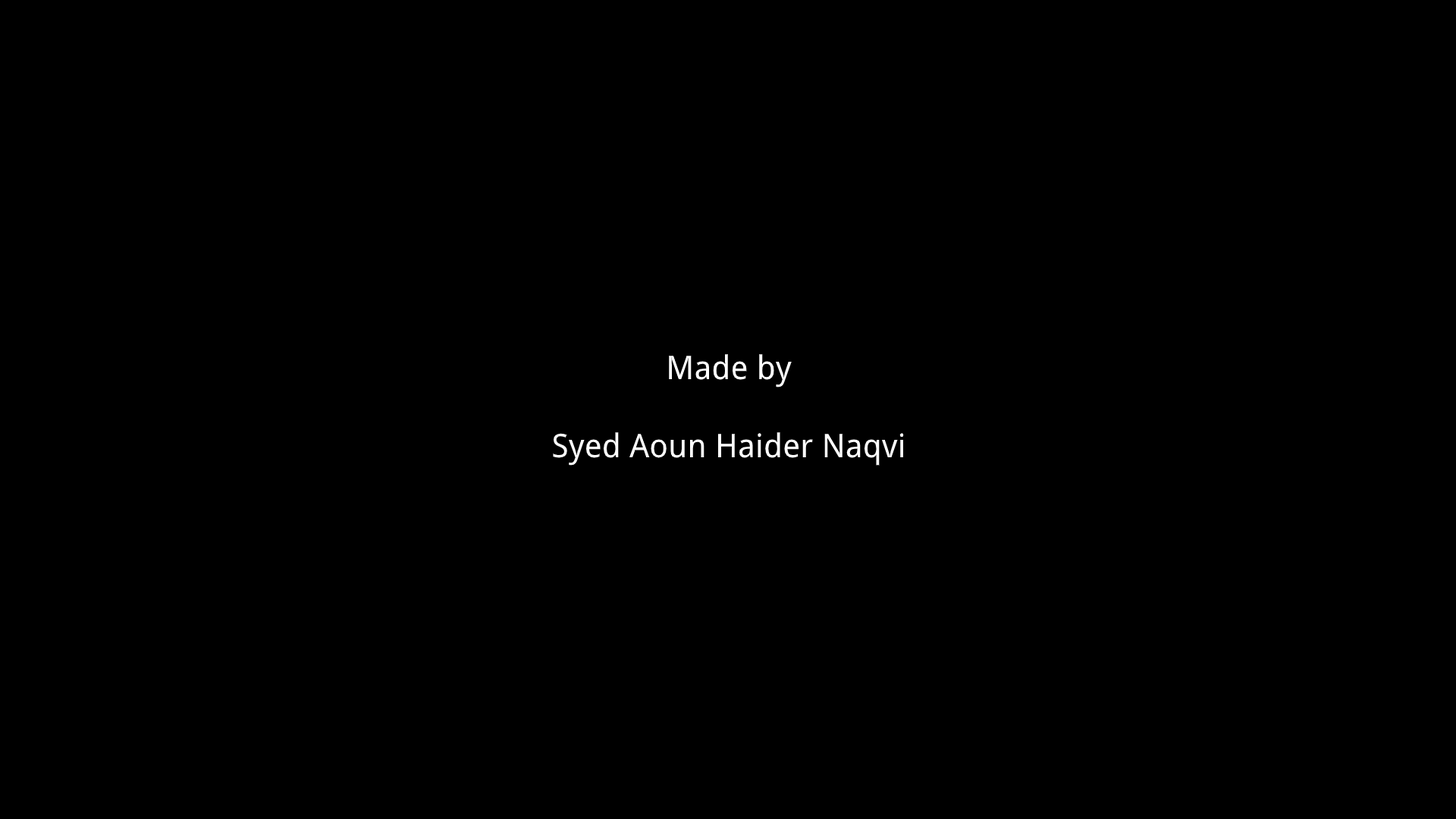
<style>
.page{position:relative;width:1456px;height:819px;background:#000000}
.page>*{position:absolute;margin:0}
.t1{font:32.6px "DroidSans";color:#ffffff}
</style>
<div class="page">
<p class="t1" style="left:553px;top:354px;width:351px;height:112px;text-align:center">Made by<br><br>Syed Aoun Haider Naqvi</p>
</div>
